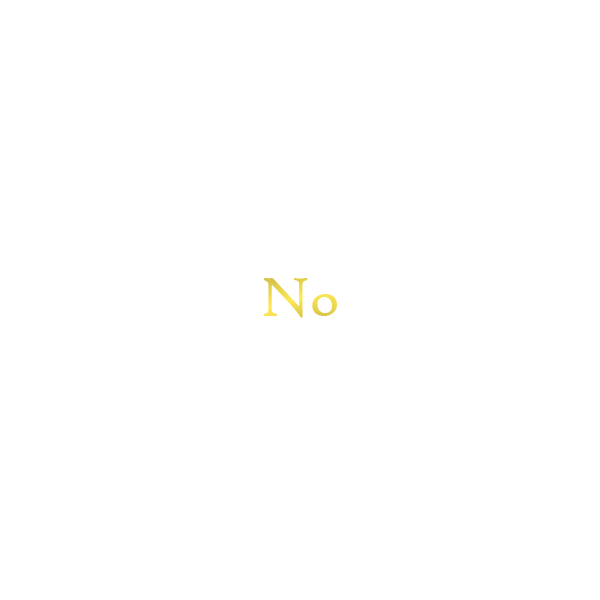
<style>
.page{position:relative;width:600px;height:600px;background:#ffffff}
.page>*{position:absolute;margin:0}
.t1{font:59.2px "HighTowerText-Reg";color:#edd950}
</style>
<div class="page">
<p class="t1" style="left:263px;top:278px;width:74px;height:40px">No</p>
</div>
